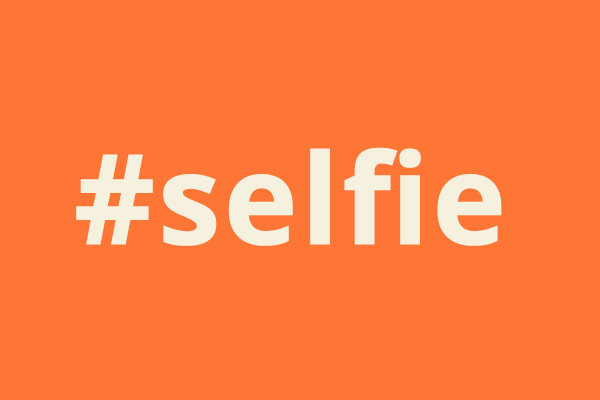
<style>
.page{position:relative;width:600px;height:400px;background:#fe7635}
.page>*{position:absolute;margin:0}
.t1{font:125px "OpenSans-Bold";color:#f6f1df;font-weight:bold}
</style>
<div class="page">
<p class="t1" style="left:76px;top:147px;width:426px;height:99px">#selfie</p>
</div>
